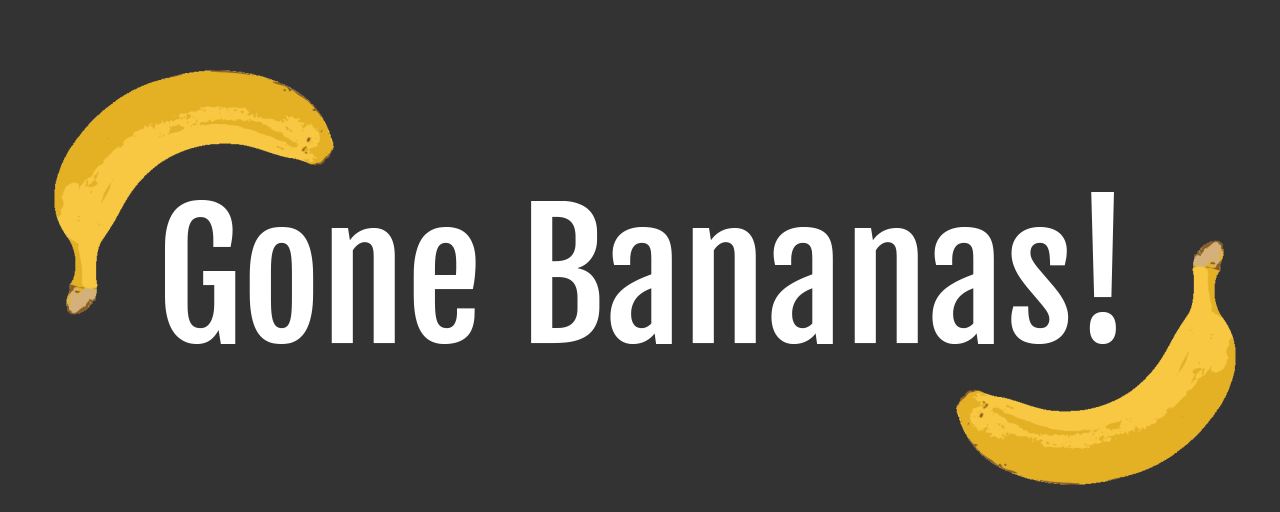
<style>
.page{position:relative;width:1280px;height:512px;background:#333333}
.page>*{position:absolute;margin:0}
.t1{font:170px "FjallaOne-Regular";color:#ffffff}
</style>
<div class="page">
<p class="t1" style="left:165px;top:192px;width:951px;height:152px">Gone Bananas!</p>
</div>
